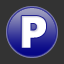
<style>
.page{position:relative;width:64px;height:64px;background:#333333}
.page>*{position:absolute;margin:0}
.t1{font:42px "Tahoma-Bold";letter-spacing:0.03em;color:#ffffff;font-weight:bold}
</style>
<div class="page">
<p class="t1" style="left:21px;top:16px;width:25px;height:32px">P</p>
</div>
